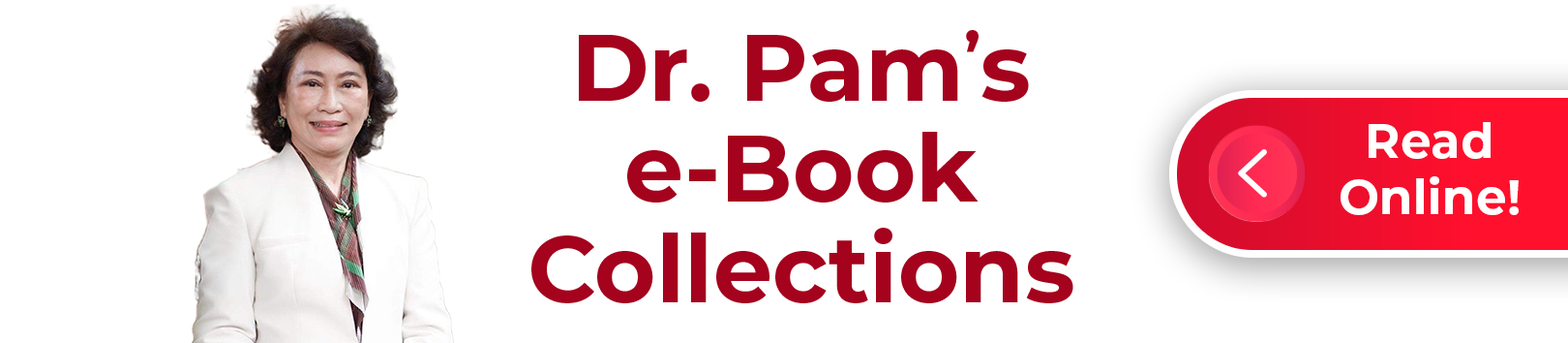
<style>
.page{position:relative;width:1568px;height:343px;background:#ffffff}
.page>*{position:absolute;margin:0}
.t1{font:94.1px/100.8px "Montserrat-Bold";color:#a4021d}
.t2{font:64.2px/100.8px "Montserrat-Bold";color:#a4021d}
.t3{font:48.4px/56.5px "Montserrat-Bold";color:#ffffff}
</style>
<div class="page">
<p class="t1" style="left:531px;top:30px;width:542px;height:273px;text-align:center">Dr. Pam<span class="t2">’</span>s<br>e-Book<br>Collections</p>
<p class="t3" style="left:1341px;top:122px;width:178px;height:93px;text-align:center">Read<br>Online!</p>
</div>
